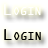
<style>
.page{position:relative;width:48px;height:48px}
.page>*{position:absolute;margin:0}
.t1{font:17px "OCRAExtended";color:#ffffff;font-variant:small-caps}
.t2{font:17px "OCRAExtended";color:#000000;font-variant:small-caps}
</style>
<div class="page">
<p class="t1" style="left:4px;top:4px;width:37px;height:11px">Login</p>
<p class="t2" style="left:4px;top:29px;width:37px;height:11px">Login</p>
</div>
